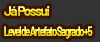
<style>
.page{position:relative;width:100px;height:42px;background:#333333}
.page>*{position:absolute;margin:0}
.t1{font:13.3px "Barlow-Bold";letter-spacing:-0.1em}
.t2{font:13.3px "Barlow-Bold";letter-spacing:-0.13em;scale:0.72 1}
</style>
<div class="page">
<p class="t1" style="left:4px;top:6px;width:46px;height:10px">Já Possui</p>
<p class="t2" style="left:4px;top:26px;width:89px;height:13px">Level de Artefato Sagrado +5</p>
</div>
